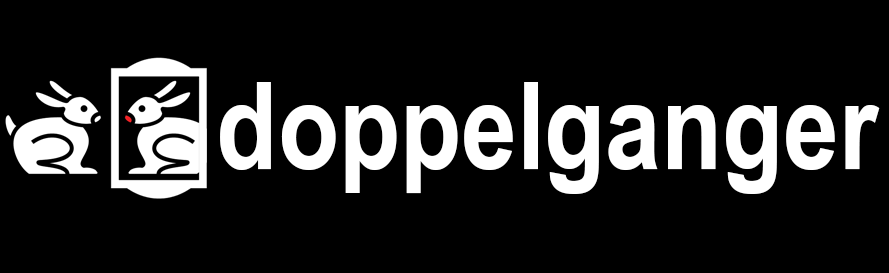
<style>
.page{position:relative;width:889px;height:273px;background:#000000}
.page>*{position:absolute;margin:0}
.t1{font:122px "ArialNarrow-Bold";color:#ffffff}
</style>
<div class="page">
<p class="t1" style="left:220px;top:82px;width:660px;height:112px">doppelganger</p>
</div>
